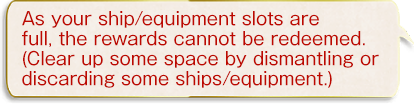
<style>
.page{position:relative;width:414px;height:105px}
.page>*{position:absolute;margin:0}
.t1{font:18px/20px "GothicMB101Pro-Regular";color:#bd0800}
</style>
<div class="page">
<p class="t1" style="left:22px;top:11px;width:357px;height:77px">As your ship/equipment slots are<br>full, the rewards cannot be redeemed.<br>(Clear up some space by dismantling or<br>discarding some ships/equipment.)</p>
</div>
